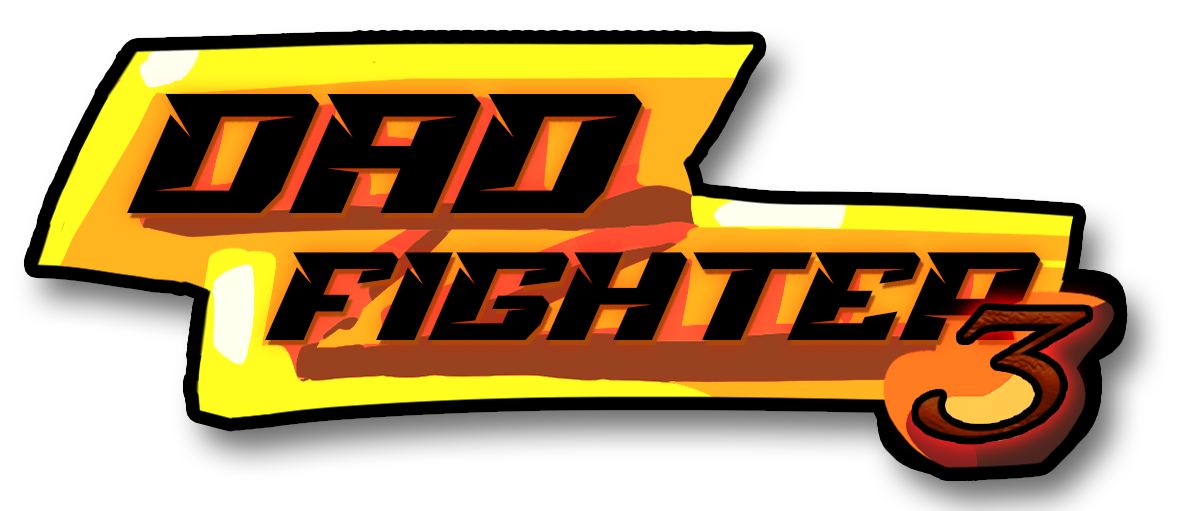
<style>
.page{position:relative;width:1185px;height:511px;background:#ffffff}
.page>*{position:absolute;margin:0}
.t1{font:142.7px/127px "BringRace";letter-spacing:0.025em;color:#000000;scale:0.76 1}
.t2{font:193.8px/127px "BringRace";letter-spacing:0.025em;color:#000000;scale:0.76 1}
</style>
<div class="page">
<p class="t1" style="left:127px;top:94px;width:914px;height:246px"><span class="t2">DAD<br></span>   FIGHTER</p>
</div>
